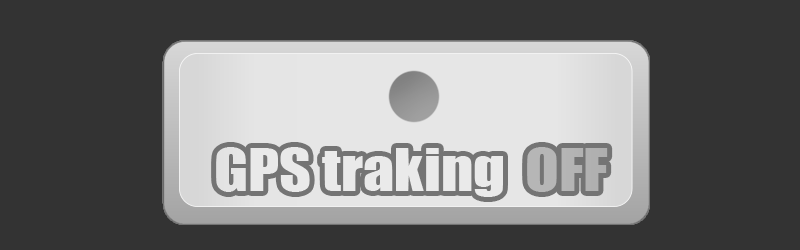
<style>
.page{position:relative;width:800px;height:250px;background:#333333}
.page>*{position:absolute;margin:0}
.t1{font:53.6px "Impact";color:#ffffff;scale:1.15 1}
.t2{font:53.6px "Impact";color:#b4b4b4;scale:1.15 1}
</style>
<div class="page">
<p class="t1" style="left:216px;top:147px;width:287px;height:50px">GPS traking</p>
<p class="t2" style="left:527px;top:147px;width:81px;height:45px">OFF</p>
</div>
